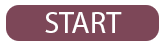
<style>
.page{position:relative;width:165px;height:46px;background:#7d4758}
.page>*{position:absolute;margin:0}
.t1{font:30px "MyriadPro-Regular";color:#ffffff}
</style>
<div class="page">
<p class="t1" style="left:45px;top:12px;width:77px;height:21px">START</p>
</div>
